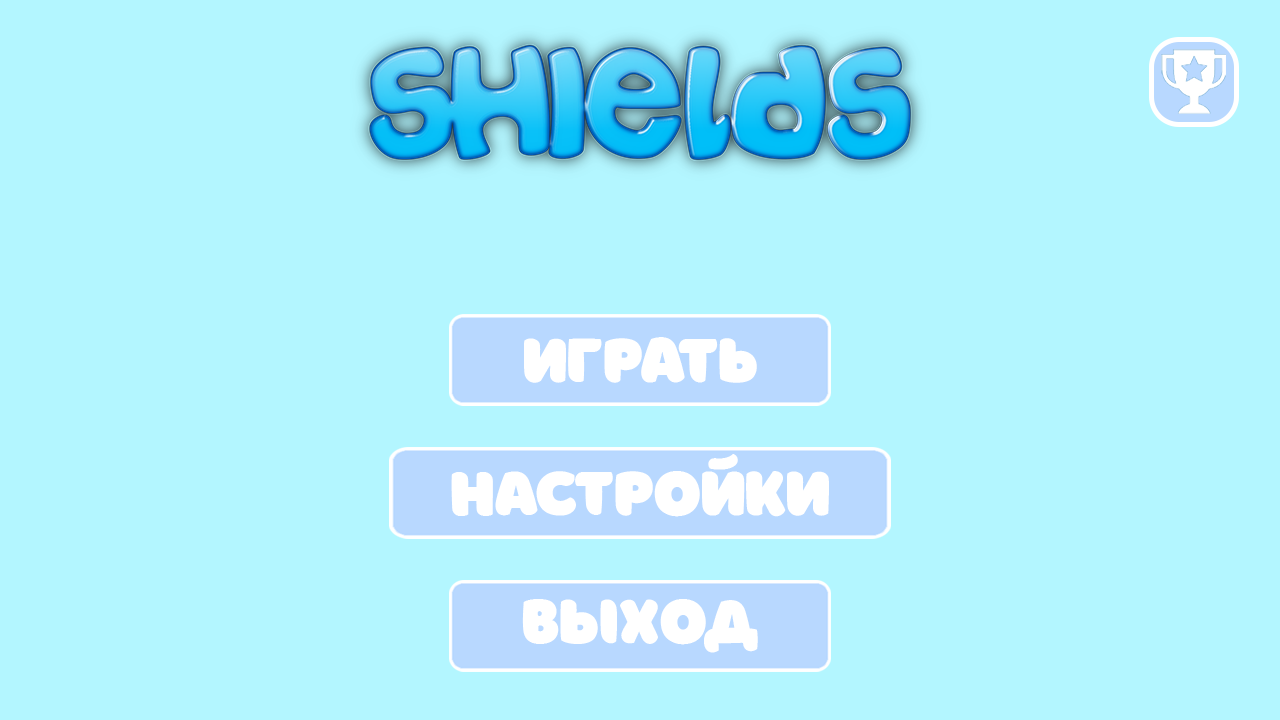
<style>
.page{position:relative;width:1280px;height:720px;background:#b3f6ff}
.page>*{position:absolute;margin:0}
.t1{font:64.7px "Borsok";color:#ffffff}
</style>
<div class="page">
<p class="t1" style="left:524px;top:337px;width:233px;height:46px">Играть</p>
<p class="t1" style="left:451px;top:454px;width:378px;height:63px">НАСТРОЙКИ</p>
<p class="t1" style="left:522px;top:599px;width:236px;height:54px">ВЫХОД</p>
</div>
